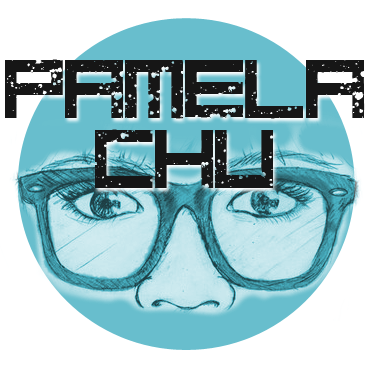
<style>
.page{position:relative;width:370px;height:370px;background:#ffffff}
.page>*{position:absolute;margin:0}
.t1{font:58.3px "digitalanarchy-Regular";color:#161616}
</style>
<div class="page">
<p class="t1" style="left:5px;top:59px;width:360px;height:129px;text-align:center">Pamela<br>Chu</p>
</div>
